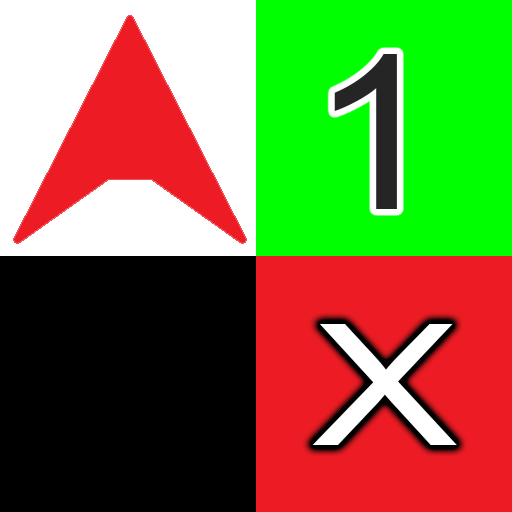
<style>
.page{position:relative;width:512px;height:512px;background:#ed1c24}
.page>*{position:absolute;margin:0}
.t1{font:216.4px "ArialMT";color:#252525;scale:1.09 1}
.t2{font:169.1px "ArialMT";color:#ffffff;scale:1.29 1}
</style>
<div class="page">
<p class="t1" style="left:334px;top:54px;width:63px;height:155px">1</p>
<p class="t2" style="left:312px;top:324px;width:145px;height:121px">X</p>
</div>
